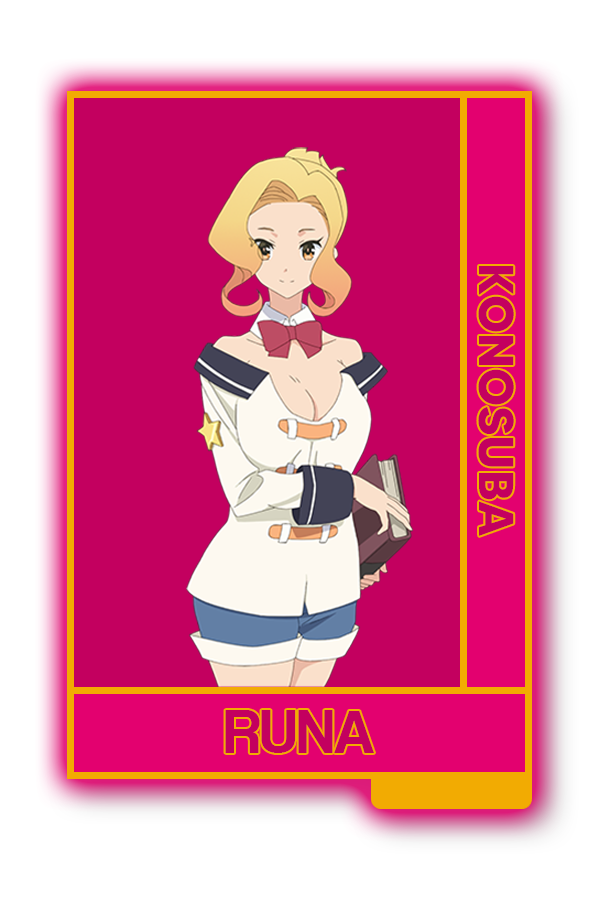
<style>
.page{position:relative;width:600px;height:900px;background:#c3005f}
.page>*{position:absolute;margin:0}
.t1{font:48.8px "MADETOMMY-Bold";color:#c3005f}
.t2{font:62.7px "CoolveticaRg-Regular";color:#c3005f}
</style>
<div class="page">
<p class="t1" style="left:478px;top:266px;width:36px;height:270px;rotate:90deg">KONOSUBA</p>
<p class="t2" style="left:225px;top:710px;width:149px;height:43px">RUNA</p>
</div>
